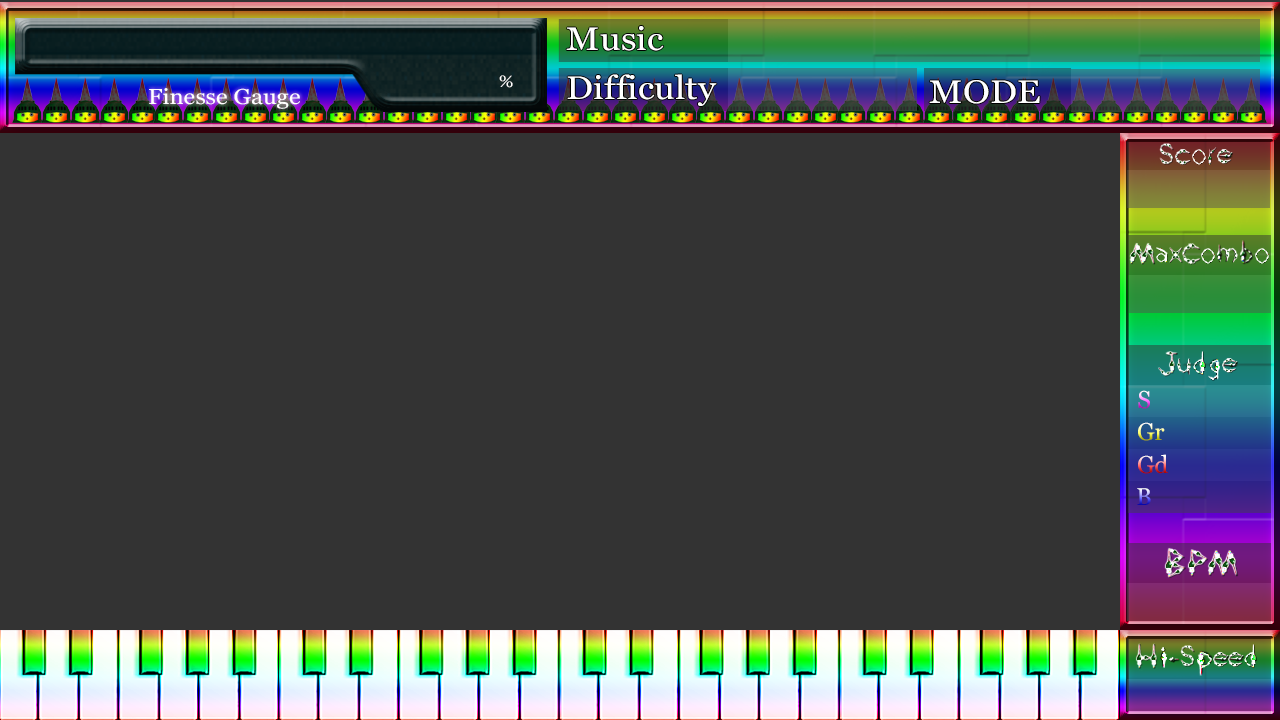
<style>
.page{position:relative;width:1280px;height:720px;background:#333333}
.page>*{position:absolute;margin:0}
.t1{font:32.4px "Vani";color:#ffffff;scale:1.11 1}
.t2{font:16.2px "Vani";color:#ffffff;scale:1.11 1}
.t3{font:21.6px "Vani";color:#ffffff;scale:1.11 1}
.t4{font:24px "Vani"}
</style>
<div class="page">
<p class="t1" style="left:566px;top:26px;width:98px;height:25px">Music</p>
<p class="t2" style="left:499px;top:75px;width:14px;height:13px">%</p>
<p class="t1" style="left:567px;top:74px;width:150px;height:32px">Difficulty</p>
<p class="t3" style="left:149px;top:88px;width:151px;height:21px">Finesse Gauge</p>
<p class="t1" style="left:929px;top:80px;width:111px;height:24px">MODE</p>
<p class="t4" style="left:1138px;top:390px;width:12px;height:19px">S</p>
<p class="t4" style="left:1138px;top:422px;width:27px;height:19px">Gr</p>
<p class="t4" style="left:1138px;top:454px;width:30px;height:20px">Gd</p>
<p class="t4" style="left:1137px;top:488px;width:14px;height:17px">B</p>
</div>
